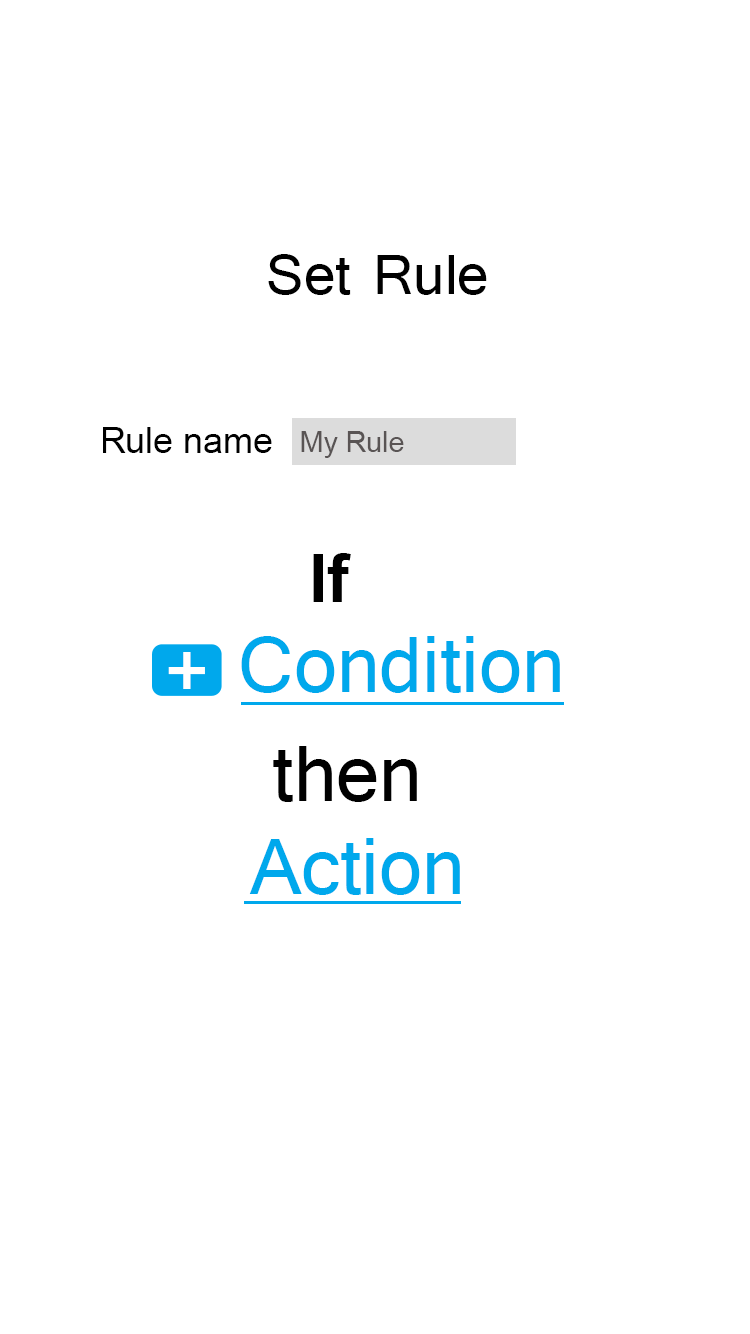
<style>
.page{position:relative;width:750px;height:1334px;background:#ffffff}
.page>*{position:absolute;margin:0}
.t1{font:72px "Tunga";color:#000000}
.t2{font:36px "ArialMT";color:#000000}
.t3{font:28.8px "ArialMT";color:#595454}
.t4{font:67.2px "Arial-BoldMT";color:#000000}
.t5{font:100.8px "Tunga";color:#00a8ec}
.t6{font:116.3px "Tunga";color:#ffffff}
.t7{font:100.8px "Tunga";color:#000000}
</style>
<div class="page">
<p class="t1" style="left:268px;top:254px;width:219px;height:41px">Set Rule</p>
<p class="t2" style="left:103px;top:427px;width:169px;height:26px">Rule name</p>
<p class="t3" style="left:301px;top:431px;width:103px;height:27px">My Rule</p>
<p class="t4" style="left:313px;top:553px;width:38px;height:49px">If</p>
<p class="t5" style="left:241px;top:636px;width:319px;height:57px">Condition</p>
<p class="t6" style="left:168px;top:652px;width:37px;height:37px">+</p>
<p class="t7" style="left:273px;top:746px;width:144px;height:56px">then</p>
<p class="t5" style="left:249px;top:838px;width:211px;height:57px">Action</p>
</div>
